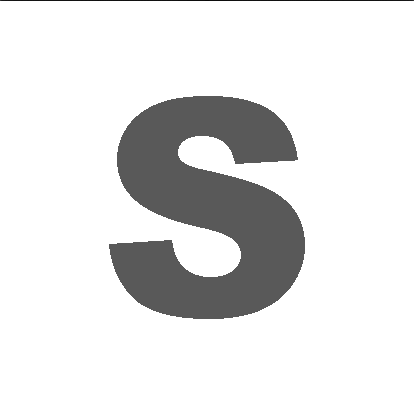
<style>
.page{position:relative;width:414px;height:414px;background:#ffffff}
.page>*{position:absolute;margin:0}
.t1{font:300px "Arial-Black";color:#595959}
</style>
<div class="page">
<p class="t1" style="left:109px;top:95px;width:196px;height:223px">S</p>
</div>
